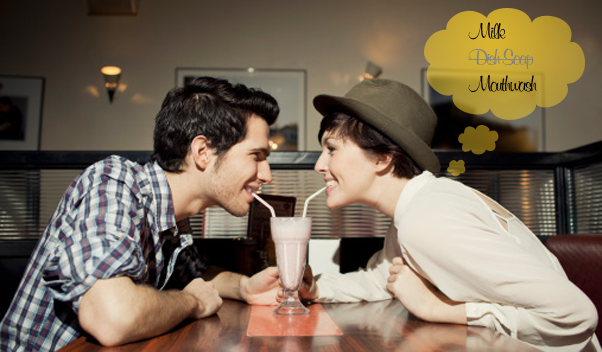
<style>
.page{position:relative;width:602px;height:352px}
.page>*{position:absolute;margin:0}
.t1{font:22px "MurrayHillBT-Bold";letter-spacing:-0.08em;color:#808080}
.t2{font:22px "MurrayHillBT-Bold";letter-spacing:-0.08em;color:#000000}
</style>
<div class="page">
<p class="t1" style="left:468px;top:22px;width:69px;height:70px"><span class="t2">Milk<br></span>Dish Soap<br><span class="t2">Mouthwash</span></p>
</div>
